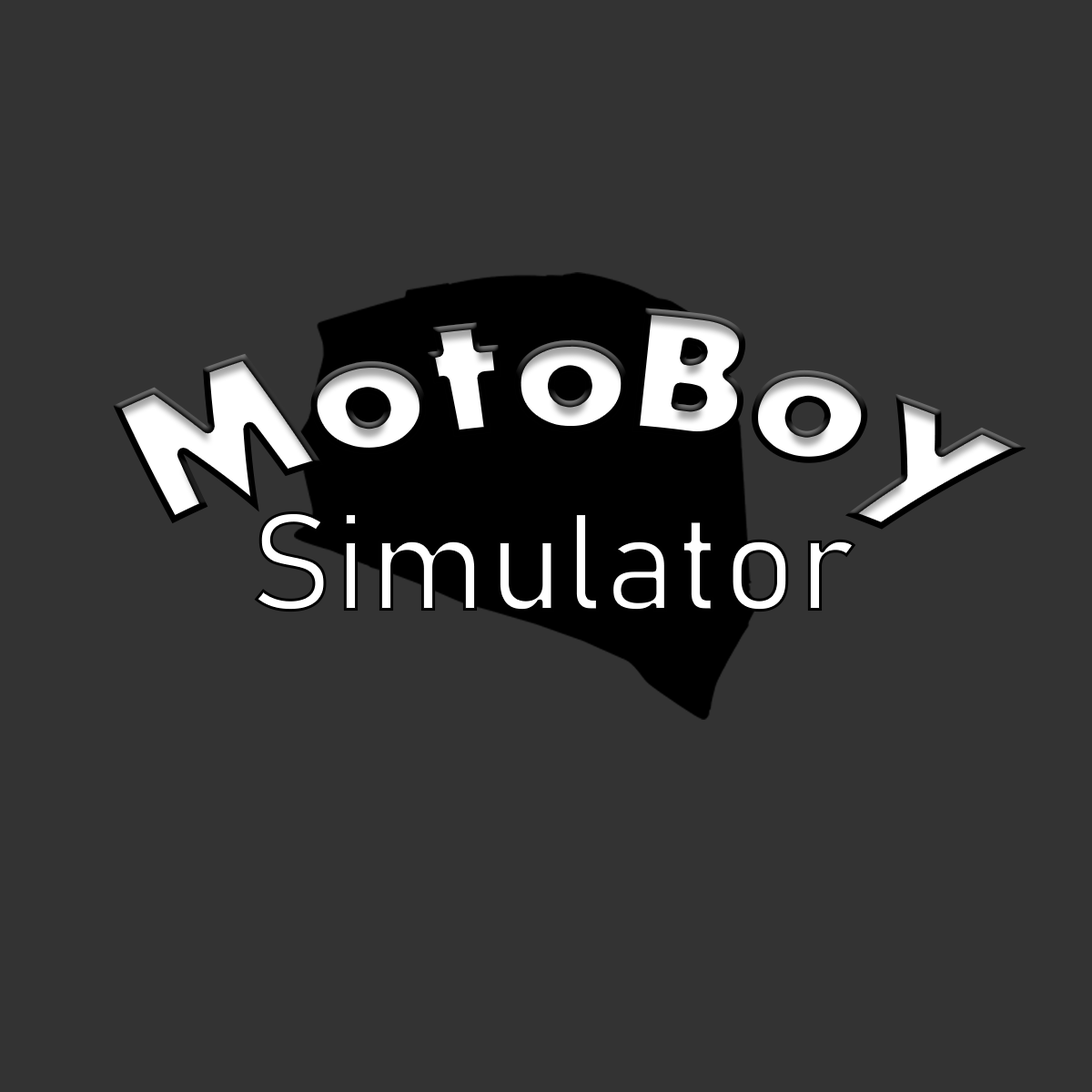
<style>
.page{position:relative;width:1092px;height:1092px;background:#333333}
.page>*{position:absolute;margin:0}
.t1{font:141px "Scream"}
.t2{font:138.3px "Bahnschrift"}
</style>
<div class="page">
<p class="t1" style="left:113px;top:308px;width:913px;height:222px">MotoBoy</p>
<p class="t2" style="left:254px;top:511px;width:602px;height:101px">Simulator</p>
</div>
